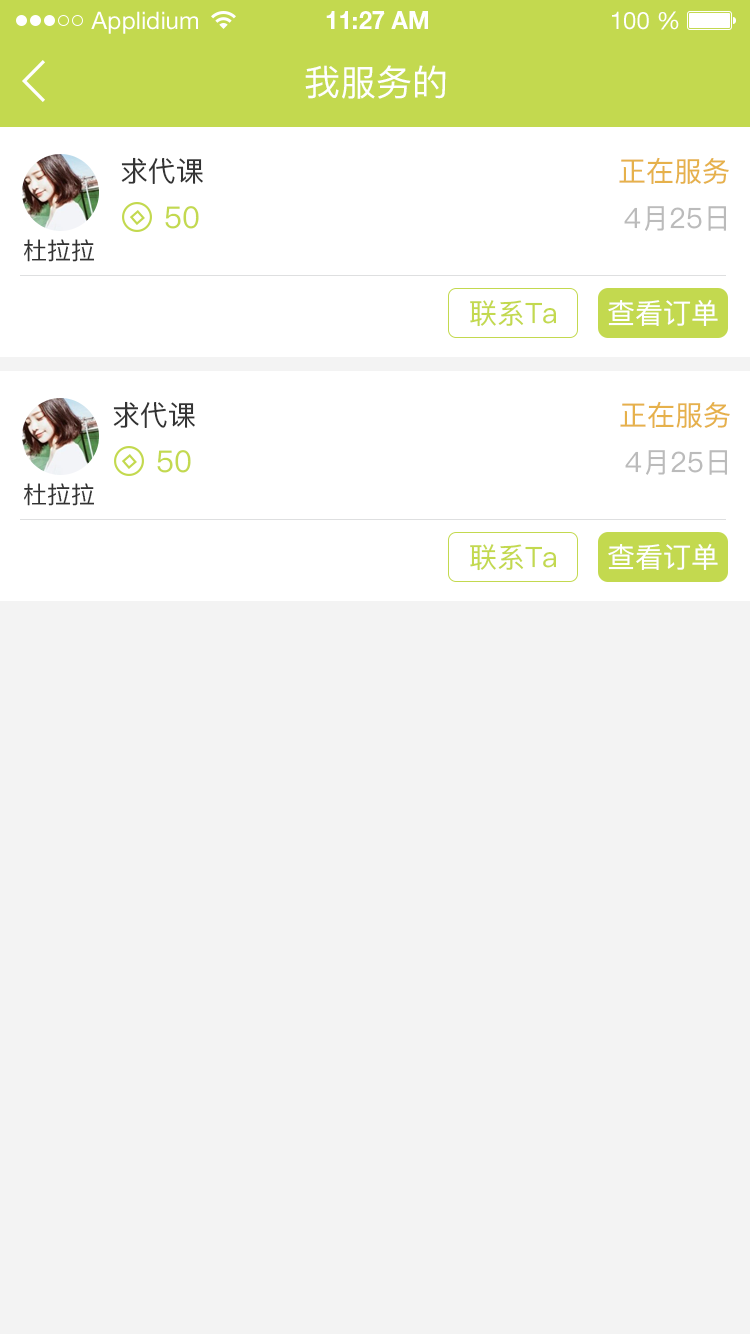
<style>
.page{position:relative;width:750px;height:1334px;background:#f3f3f3}
.page>*{position:absolute;margin:0}
.t1{font:24px "HelveticaNeueLTStd-Roman";color:#ffffff}
.t2{font:24px "HelveticaNeueLTStd-Bd";color:#ffffff}
.t3{font:36px "PingFangSC-Regular";color:#ffffff}
.t4{font:28px "PingFangSC-Regular";color:#333333}
.t5{font:28px "PingFangSC-Regular";color:#e6b14b}
.t6{font:30px "PingFangSC-Regular";color:#c3d94f}
.t7{font:28px "PingFangSC-Regular";color:#bbbbbb}
.t8{font:24px "PingFangSC-Regular";color:#333333}
.t9{font:28px "PingFangSC-Regular";color:#c3d94f}
.t10{font:28px "PingFangSC-Regular";color:#ffffff}
</style>
<div class="page">
<p class="t1" style="left:91px;top:11px;width:107px;height:23px">Applidium</p>
<p class="t2" style="left:326px;top:11px;width:102px;height:18px">11:27 AM</p>
<p class="t1" style="left:612px;top:11px;width:67px;height:19px">100 %</p>
<p class="t3" style="left:305px;top:65px;width:141px;height:34px">我服务的</p>
<p class="t4" style="left:121px;top:157px;width:82px;height:27px">求代课</p>
<p class="t5" style="left:619px;top:157px;width:110px;height:27px">正在服务</p>
<p class="t6" style="left:165px;top:206px;width:34px;height:23px">50</p>
<p class="t7" style="left:624px;top:206px;width:102px;height:25px">4月25日</p>
<p class="t8" style="left:24px;top:239px;width:70px;height:23px">杜拉拉</p>
<p class="t9" style="left:470px;top:300px;width:86px;height:27px">联系Ta</p>
<p class="t10" style="left:608px;top:299px;width:110px;height:27px">查看订单</p>
<p class="t4" style="left:113px;top:401px;width:82px;height:27px">求代课</p>
<p class="t5" style="left:620px;top:401px;width:110px;height:27px">正在服务</p>
<p class="t6" style="left:157px;top:450px;width:34px;height:23px">50</p>
<p class="t7" style="left:625px;top:450px;width:102px;height:25px">4月25日</p>
<p class="t8" style="left:24px;top:483px;width:70px;height:23px">杜拉拉</p>
<p class="t9" style="left:470px;top:544px;width:86px;height:27px">联系Ta</p>
<p class="t10" style="left:608px;top:543px;width:110px;height:27px">查看订单</p>
</div>
